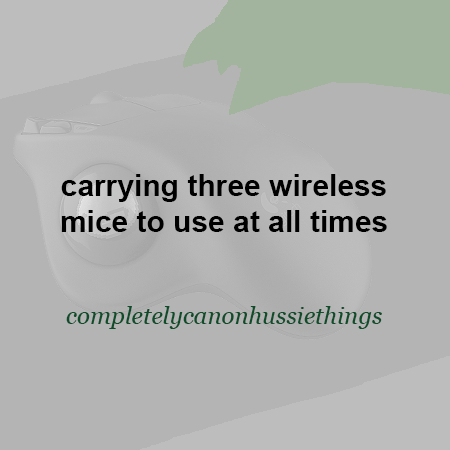
<style>
.page{position:relative;width:450px;height:450px;background:#b4b4b4}
.page>*{position:absolute;margin:0}
.t1{font:30px "Arial-BoldMT";color:#000000}
.t2{font:24px "Georgia-Italic";color:#0f4c2a}
</style>
<div class="page">
<p class="t1" style="left:61px;top:174px;width:326px;height:58px;text-align:center">carrying three wireless<br>mice to use at all times</p>
<p class="t2" style="left:66px;top:306px;width:316px;height:23px">completelycanonhussiethings</p>
</div>
